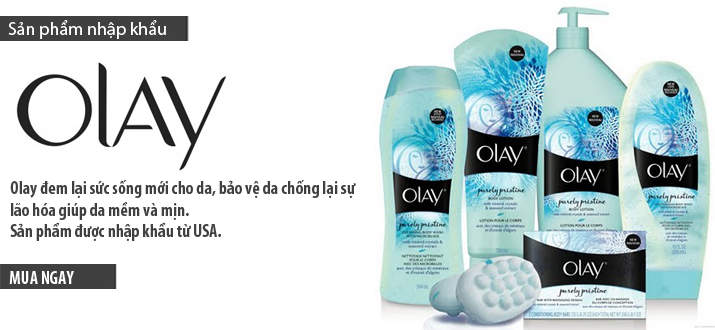
<style>
.page{position:relative;width:715px;height:330px;background:#ffffff}
.page>*{position:absolute;margin:0}
.t1{font:18px "MyriadPro-Regular";color:#ffffff}
.t2{font:18px "MyriadPro-BoldCond";color:#404040}
.t3{font:18px "MyriadPro-BoldCond";color:#ffffff}
</style>
<div class="page">
<p class="t1" style="left:8px;top:20px;width:158px;height:19px">Sản phẩm nhập khẩu</p>
<p class="t2" style="left:10px;top:180px;width:346px;height:61px">Olay đem lại sức sống mới cho da, bảo vệ da chống lại sự <br>lão hóa giúp da mềm và mịn.<br>Sản phẩm được nhập khẩu từ USA.</p>
<p class="t3" style="left:9px;top:271px;width:65px;height:13px">MUA NGAY</p>
</div>
